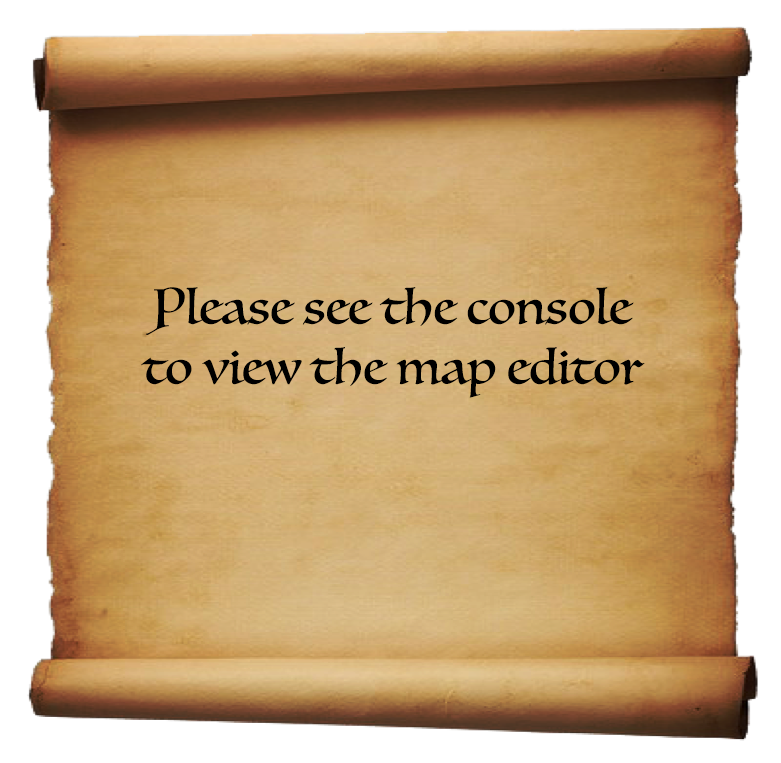
<style>
.page{position:relative;width:781px;height:763px}
.page>*{position:absolute;margin:0}
.t1{font:48px/60px "Luminari-Regular";color:#000000}
</style>
<div class="page">
<p class="t1" style="left:141px;top:287px;width:504px;height:111px;text-align:center">Please see the console to view the map editor</p>
</div>
